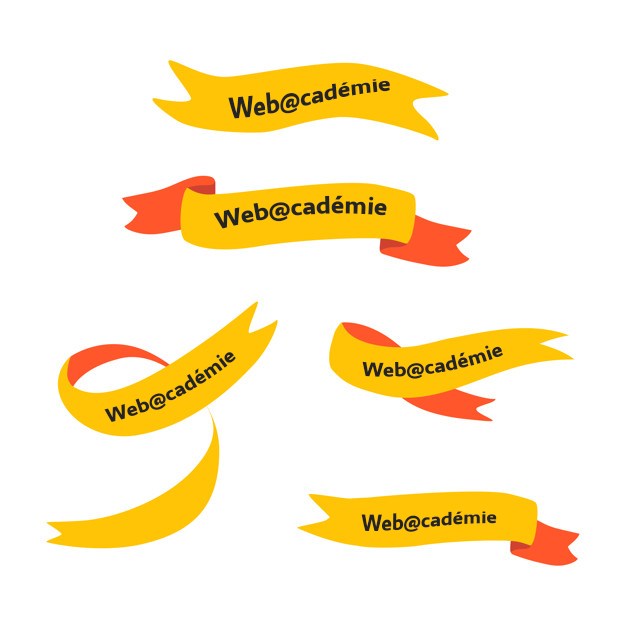
<style>
.page{position:relative;width:626px;height:626px;background:#ffffff}
.page>*{position:absolute;margin:0}
.t1{font:25.1px "Seravek-Bold";letter-spacing:-0.02em;color:#252425}
.t2{font:20.9px "Seravek-Bold";letter-spacing:-0.02em;color:#252425}
</style>
<div class="page">
<p class="t1" style="left:228px;top:79px;width:162px;height:40px;rotate:-5deg">Web@cadémie</p>
<p class="t1" style="left:213px;top:195px;width:174px;height:34px;rotate:-5deg">Web@cadémie</p>
<p class="t2" style="left:104px;top:352px;width:132px;height:70px;rotate:-27deg">Web@cadémie</p>
<p class="t2" style="left:362px;top:345px;width:141px;height:34px;rotate:-8deg">Web@cadémie</p>
<p class="t2" style="left:361px;top:511px;width:136px;height:21px">Web@cadémie</p>
</div>
